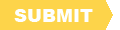
<style>
.page{position:relative;width:120px;height:30px;background:#fdd44a}
.page>*{position:absolute;margin:0}
.t1{font:18px "Arial-Black";color:#fdffff}
</style>
<div class="page">
<p class="t1" style="left:14px;top:9px;width:79px;height:13px">SUBMIT</p>
</div>
